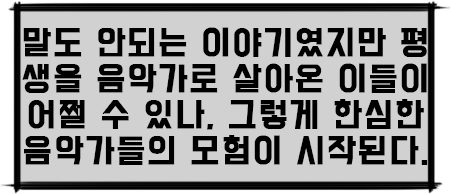
<style>
.page{position:relative;width:451px;height:194px;background:#d1d1d1}
.page>*{position:absolute;margin:0}
.t1{font:30px "BMDoHyeon";letter-spacing:0.05em;color:#000000;font-weight:bold}
</style>
<div class="page">
<p class="t1" style="left:22px;top:27px;width:406px;height:138px;text-align:center">말도 안되는 이야기였지만 평 생을 음악가로 살아온 이들이 어쩔 수 있나, 그렇게 한심한 음악가들의 모험이 시작된다.</p>
</div>
